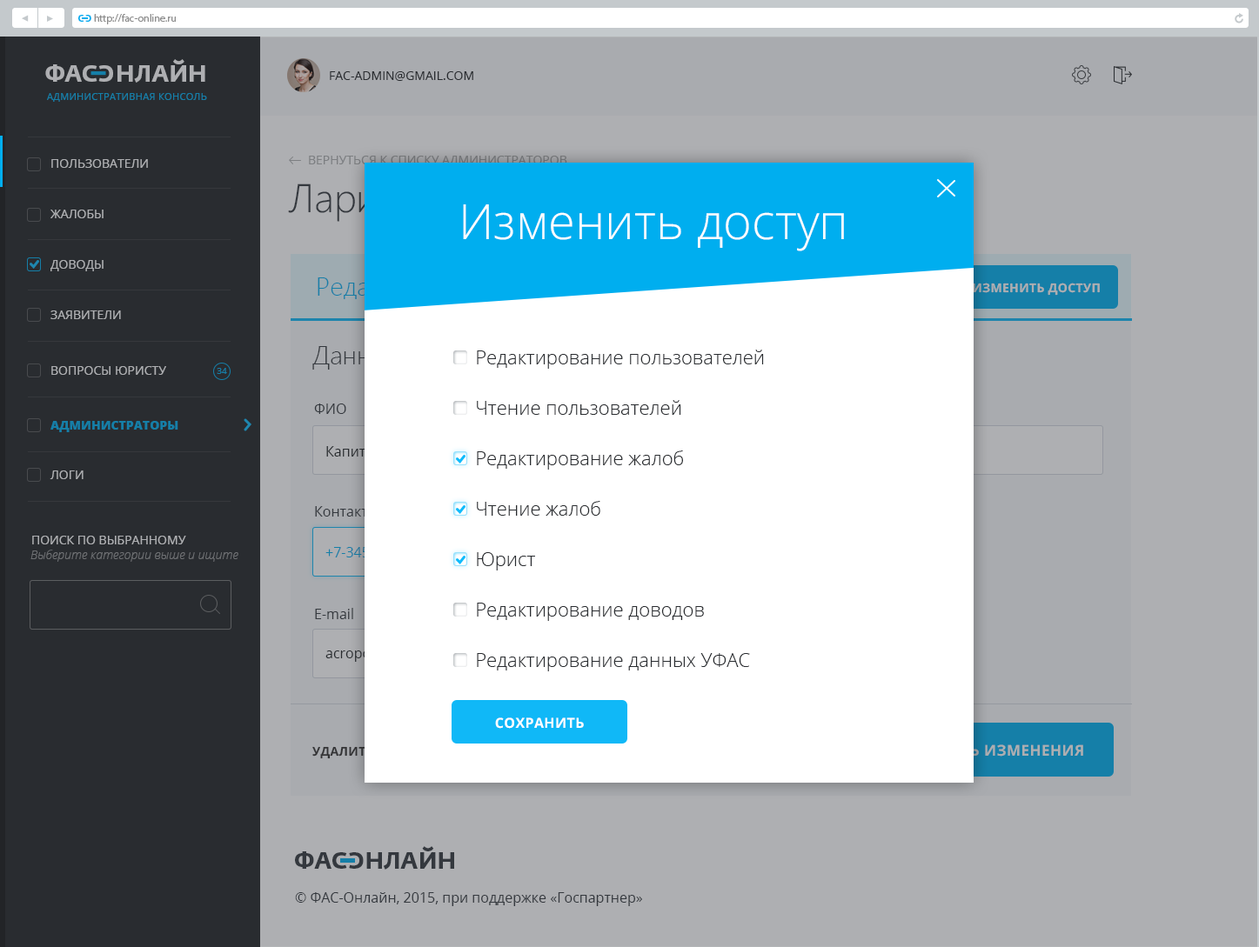
<style>
.page{position:relative;width:1259px;height:947px;background:#aeafb2}
.page>*{position:absolute;margin:0}
.t1{font:8.7px "FedraSansPro-Bold";color:#00aeef;text-transform:uppercase}
.t2{font:10.4px "MyriadPro-Regular";color:#8d8d8d}
.t3{font:23.5px "FedraSansPro-Bold";color:#aeafb2;text-transform:uppercase}
.t4{font:12.2px "OpenSans";color:#222427;text-transform:uppercase}
.t5{font:9.6px "OpenSans";letter-spacing:0.03em;color:#157fa8;text-transform:uppercase}
.t6{font:12.2px "OpenSans";color:#aeafb2;text-transform:uppercase}
.t7{font:12.2px "OpenSans";color:#717678;text-transform:uppercase}
.t8{font:48.7px "OpenSans-Light";color:#fefefe}
.t9{font:12.2px "OpenSans-Bold";letter-spacing:0.03em;color:#adafb1;text-transform:uppercase}
.t10{font:19.1px/36.5px "OpenSans-Light";color:#292c30}
.t11{font:8.7px "OpenSans";color:#157fa8}
.t12{font:12.2px "OpenSans-Extrabold";color:#157fa8;text-transform:uppercase}
.t13{font:12.2px "OpenSansLight-Italic";color:#6e7073}
.t14{font:13.9px "OpenSans-Bold";letter-spacing:0.03em;color:#ffffff;text-transform:uppercase}
.t15{font:15.1px "OpenSans-Bold";letter-spacing:0.03em;text-transform:uppercase}
.t16{font:23.5px "FedraSansPro-Bold";color:#34383e;text-transform:uppercase}
.t17{font:13.9px "OpenSans";color:#34383e}
</style>
<div class="page">
<p class="t1" style="left:78px;top:15px;width:6px;height:7px">c</p>
<p class="t1" style="left:85px;top:15px;width:6px;height:7px;rotate:180deg">c</p>
<p class="t2" style="left:94px;top:14px;width:82px;height:10px">http://fac-online.ru</p>
<p class="t3" style="left:45px;top:59px;width:160px;height:24px">ФАc   НЛАЙН</p>
<p class="t3" style="left:98px;top:65px;width:15px;height:17px;rotate:180deg">c</p>
<p class="t4" style="left:330px;top:71px;width:143px;height:10px">FAC-Admin@gmail.com</p>
<p class="t5" style="left:47px;top:93px;width:160px;height:9px">Административная консоль</p>
<p class="t6" style="left:51px;top:159px;width:97px;height:9px">Пользователи</p>
<p class="t7" style="left:309px;top:156px;width:258px;height:11px">Вернуться к списку администраторов</p>
<p class="t6" style="left:50px;top:210px;width:54px;height:8px">жалобы</p>
<p class="t8" style="left:463px;top:204px;width:381px;height:47px">Изменить доступ</p>
<p class="t6" style="left:50px;top:260px;width:54px;height:11px">Доводы</p>
<p class="t9" style="left:973px;top:283px;width:127px;height:13px">Изменить доступ</p>
<p class="t6" style="left:50px;top:311px;width:71px;height:8px">ЗАявители</p>
<p class="t10" style="left:477px;top:350px;width:287px;height:322px">Редактирование пользователей<br>Чтение пользователей<br>Редактирование жалоб<br>Чтение жалоб<br>Юрист<br>Редактирование доводов<br>Редактирование данных УФАС</p>
<p class="t6" style="left:51px;top:366px;width:115px;height:9px">вопросы юристу</p>
<p class="t11" style="left:217px;top:368px;width:10px;height:6px">34</p>
<p class="t12" style="left:50px;top:421px;width:128px;height:11px">Администраторы</p>
<p class="t6" style="left:50px;top:471px;width:34px;height:8px">ЛОги</p>
<p class="t6" style="left:32px;top:536px;width:154px;height:9px">Поиск по выбранному</p>
<p class="t13" style="left:30px;top:550px;width:208px;height:12px">Выберите категории выше и ищите</p>
<p class="t14" style="left:495px;top:718px;width:89px;height:11px">Сохранить</p>
<p class="t15" style="left:884px;top:745px;width:199px;height:12px">Сохранить изменения</p>
<p class="t16" style="left:295px;top:846px;width:159px;height:24px">ФАc   НЛАЙН</p>
<p class="t16" style="left:349px;top:853px;width:15px;height:16px;rotate:180deg">c</p>
<p class="t17" style="left:295px;top:893px;width:347px;height:13px">© ФАС-Онлайн, 2015, при поддержке «Госпартнер»</p>
</div>
